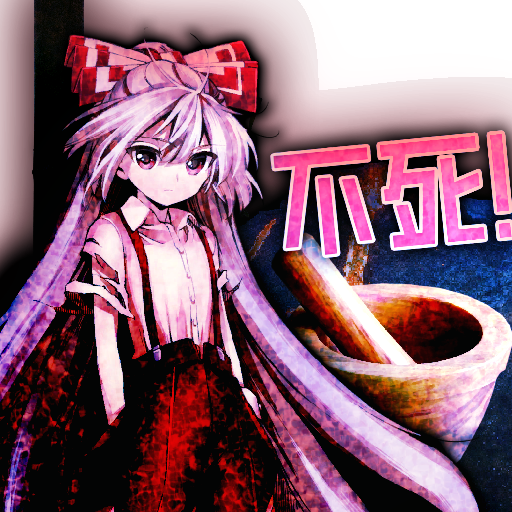
<style>
.page{position:relative;width:512px;height:512px}
.page>*{position:absolute;margin:0}
.t1{font:116.7px "ChuangkitKingKongRegular";scale:0.92 1}
</style>
<div class="page">
<p class="t1" style="left:273px;top:133px;width:239px;height:122px;rotate:-6deg">不死!</p>
</div>
